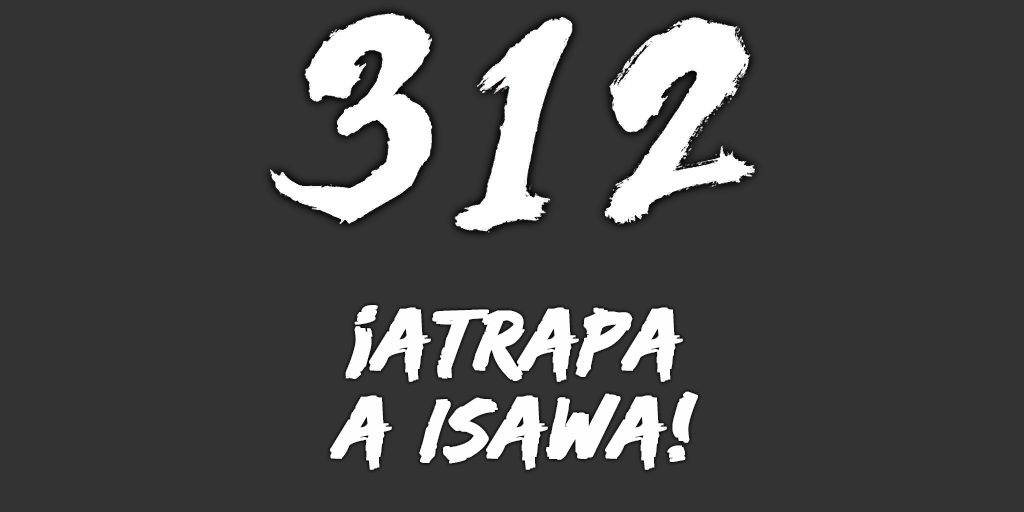
<style>
.page{position:relative;width:1024px;height:512px;background:#333333}
.page>*{position:absolute;margin:0}
.t1{font:88px/88px "EdoSZ";color:#fefefe;font-weight:bold;font-style:italic;scale:1.04 1}
</style>
<div class="page">
<p class="t1" style="left:330px;top:305px;width:368px;height:165px;text-align:center">¡atrapa<br>a isawa!</p>
</div>
